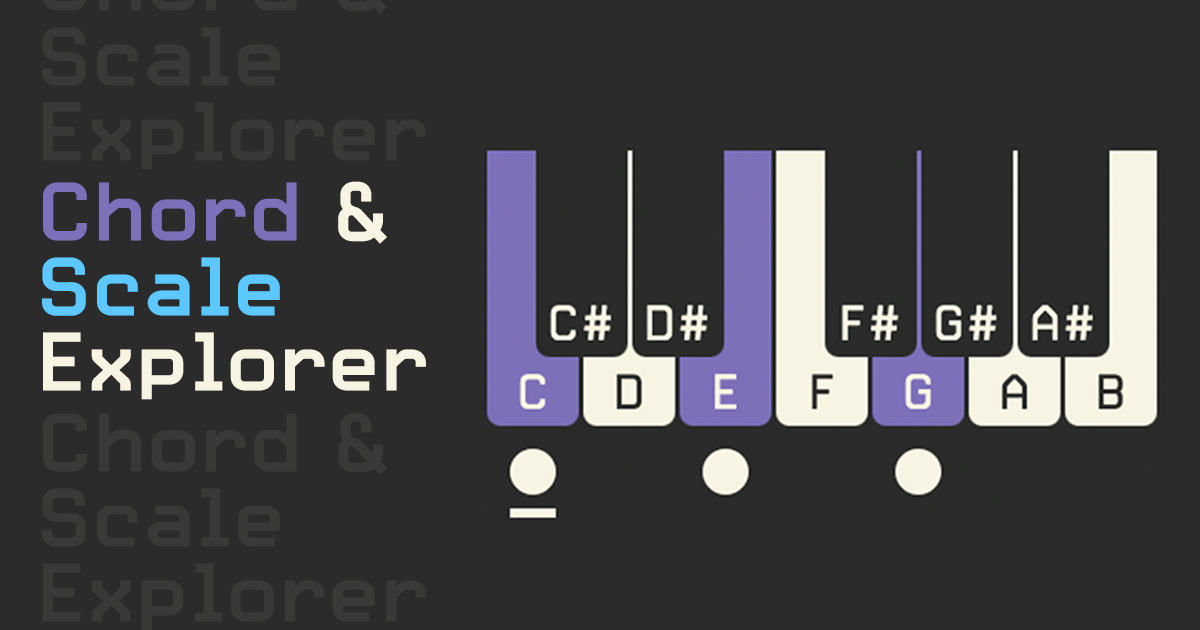
<style>
.page{position:relative;width:1200px;height:630px;background:#2a2b2a}
.page>*{position:absolute;margin:0}
.t1{font:100px/75px "Carbon-Bold";letter-spacing:-0.04em;color:#f8f4e3}
.t2{font:100px/75px "Carbon-Bold";letter-spacing:-0.04em;color:#7d70ba}
.t3{font:100px/75px "Carbon-Bold";letter-spacing:-0.04em;color:#5cc8ff}
.t4{font:100px/75px "Carbon-Bold";letter-spacing:-0.04em;color:#393937}
</style>
<div class="page">
<p class="t1" style="left:42px;top:181px;width:384px;height:219px"><span class="t2">Chord</span> &amp;<br><span class="t3">Scale<br></span>Explorer</p>
<p class="t4" style="left:42px;top:412px;width:384px;height:219px">Chord &amp;<br>Scale<br>Explorer</p>
</div>
